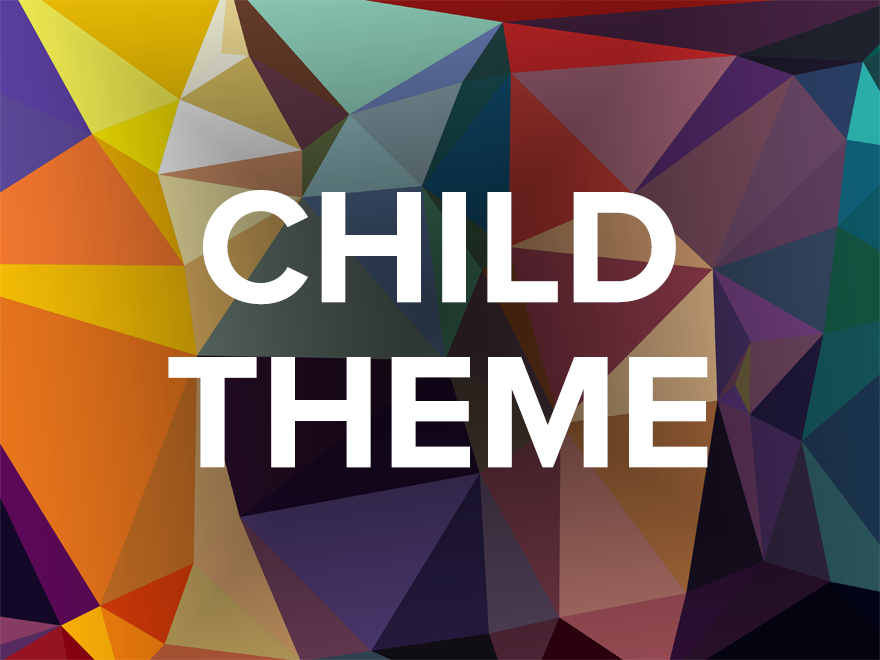
<style>
.page{position:relative;width:880px;height:660px}
.page>*{position:absolute;margin:0}
.t1{font:165px/165px "ProximaNova-Bold";color:#ffffff}
</style>
<div class="page">
<p class="t1" style="left:168px;top:190px;width:540px;height:278px;text-align:center">CHILD<br>THEME</p>
</div>
